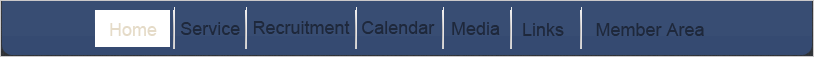
<style>
.page{position:relative;width:814px;height:57px;background:#384d73}
.page>*{position:absolute;margin:0}
.t1{font:18px "ArialMT";color:#1a2438}
</style>
<div class="page">
<p class="t1" style="left:181px;top:22px;width:59px;height:13px">Service</p>
<p class="t1" style="left:253px;top:21px;width:97px;height:13px">Recruitment</p>
<p class="t1" style="left:362px;top:21px;width:73px;height:13px">Calendar</p>
<p class="t1" style="left:452px;top:22px;width:48px;height:13px">Media</p>
<p class="t1" style="left:523px;top:23px;width:41px;height:13px">Links</p>
<p class="t1" style="left:596px;top:23px;width:108px;height:13px">Member Area</p>
</div>
